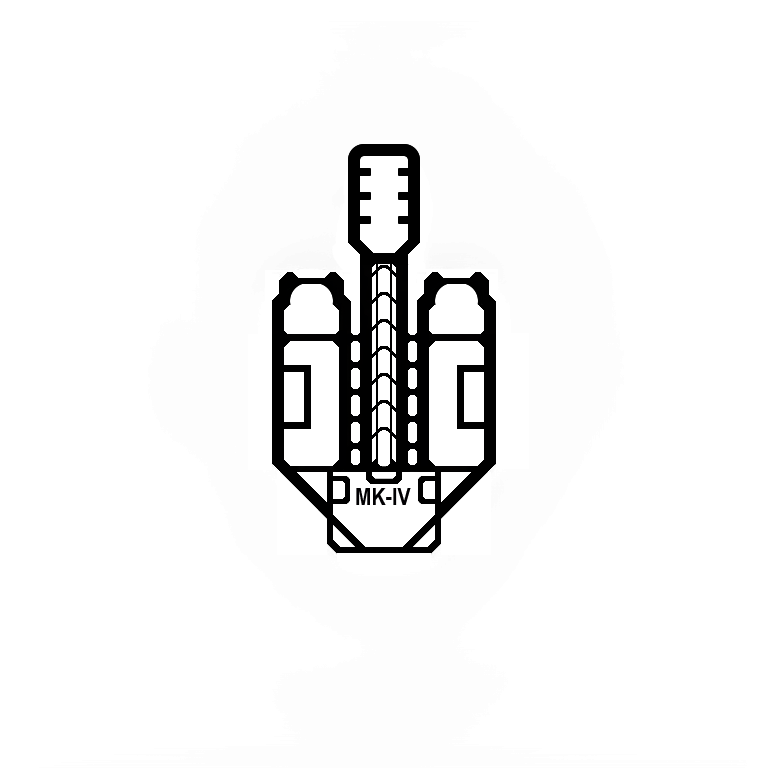
<style>
.page{position:relative;width:768px;height:768px;background:#ffffff}
.page>*{position:absolute;margin:0}
.t1{font:24px "ArialNarrow-Bold";color:#010002}
</style>
<div class="page">
<p class="t1" style="left:356px;top:488px;width:55px;height:17px">MK-IV</p>
</div>
